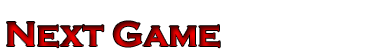
<style>
.page{position:relative;width:383px;height:52px;background:#ffffff}
.page>*{position:absolute;margin:0}
.t1{font:36px "CopperplateGothic-Bold"}
</style>
<div class="page">
<p class="t1" style="left:7px;top:21px;width:213px;height:27px">Next Game</p>
</div>
